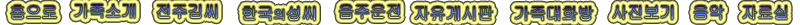
<style>
.page{position:relative;width:800px;height:25px}
.page>*{position:absolute;margin:0}
.t1{font:16.7px "GulimChe";scale:0.96 1}
.t2{font:13.9px "GulimChe";scale:0.96 1}
.t3{font:13px "GulimChe";scale:0.96 1}
</style>
<div class="page">
<p class="t1" style="left:11px;top:5px;width:46px;height:14px"><span class="t2"> </span> 홈으로</p>
<p class="t1" style="left:74px;top:4px;width:61px;height:14px">가족소개</p>
<p class="t1" style="left:157px;top:4px;width:60px;height:15px">전주김씨</p>
<p class="t1" style="left:243px;top:6px;width:72px;height:15px">한국<span class="t3">의</span>성씨</p>
<p class="t1" style="left:339px;top:4px;width:61px;height:15px">음주운전</p>
<p class="t1" style="left:415px;top:6px;width:78px;height:15px">자유게시판</p>
<p class="t1" style="left:515px;top:6px;width:78px;height:15px">가족대화방</p>
<p class="t1" style="left:613px;top:5px;width:60px;height:15px">사진보기</p>
<p class="t1" style="left:694px;top:5px;width:30px;height:15px">음악</p>
<p class="t1" style="left:743px;top:5px;width:44px;height:15px">자료실</p>
</div>
